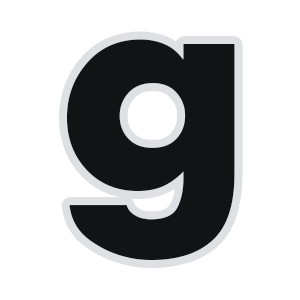
<style>
.page{position:relative;width:300px;height:300px;background:#ffffff}
.page>*{position:absolute;margin:0}
.t1{font:280px "Futura-Bold";letter-spacing:-0.04em;color:#111314}
</style>
<div class="page">
<p class="t1" style="left:66px;top:39px;width:169px;height:221px">g</p>
</div>
